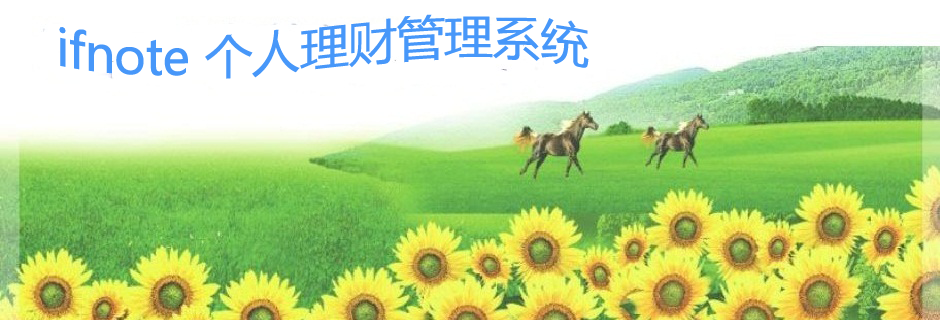
<style>
.page{position:relative;width:940px;height:320px;background:#ffffff}
.page>*{position:absolute;margin:0}
.t1{font:48px "MicrosoftYaHei";color:#4797f9}
</style>
<div class="page">
<p class="t1" style="left:59px;top:14px;width:530px;height:65px">ifnote 个人理财管理系统</p>
</div>
